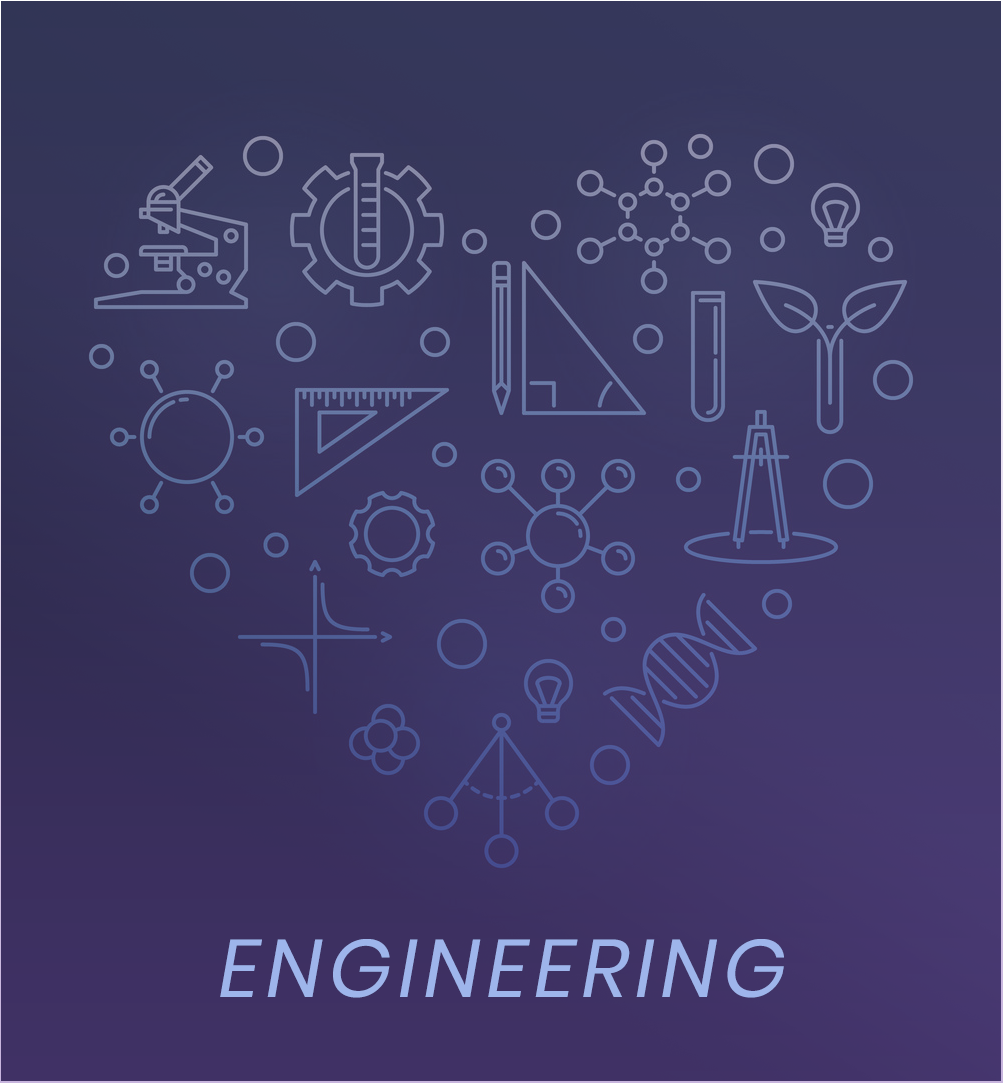
<style>
.page{position:relative;width:1003px;height:1083px}
.page>*{position:absolute;margin:0}
.t1{font:140px "Poppins-Regular";letter-spacing:0.075em;color:#9eb5eb;font-style:italic}
</style>
<div class="page">
<p class="t1" style="left:220px;top:939px;width:564px;height:59px">ENGINEERING</p>
</div>
